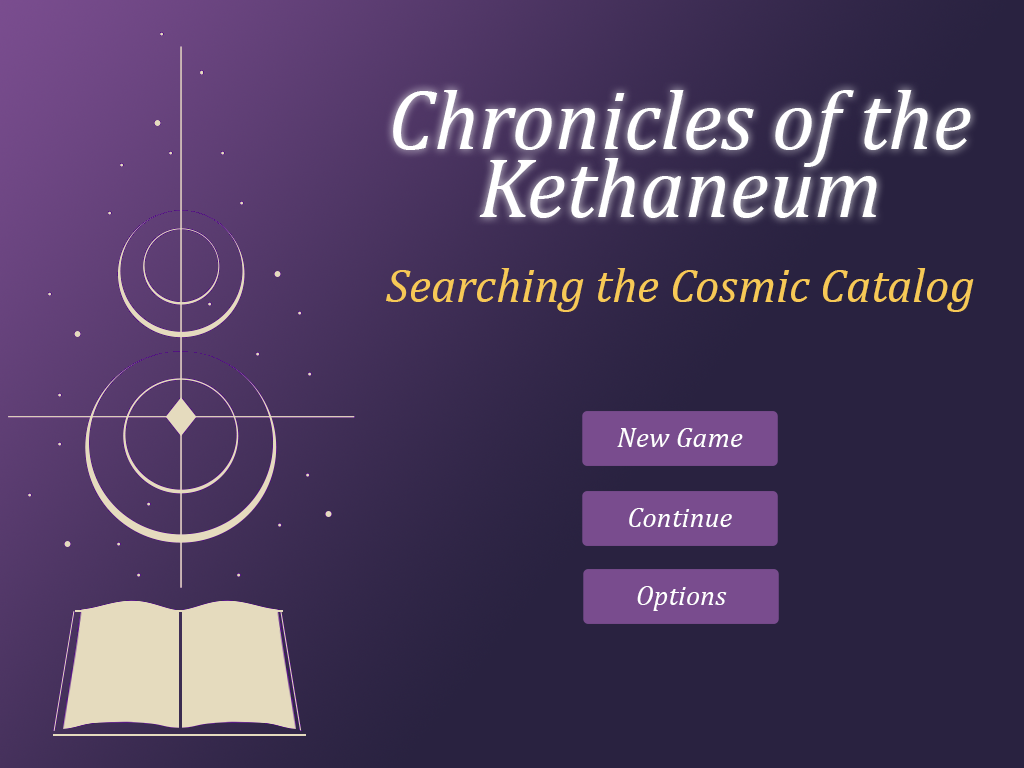
<style>
.page{position:relative;width:1024px;height:768px;background:#292240}
.page>*{position:absolute;margin:0}
.t1{font:84.9px "Cambria-Italic";color:#ffffff}
.t2{font:48px "Cambria-Italic";color:#f7c956}
.t3{font:28.3px "Cambria-Italic";color:#ffffff}
</style>
<div class="page">
<p class="t1" style="left:393px;top:90px;width:578px;height:128px">Chronicles of the Kethaneum</p>
<p class="t2" style="left:386px;top:268px;width:588px;height:44px">Searching the Cosmic Catalog</p>
<p class="t3" style="left:617px;top:428px;width:126px;height:19px">New Game</p>
<p class="t3" style="left:629px;top:508px;width:103px;height:19px">Continue</p>
<p class="t3" style="left:637px;top:586px;width:90px;height:25px">Options</p>
</div>
